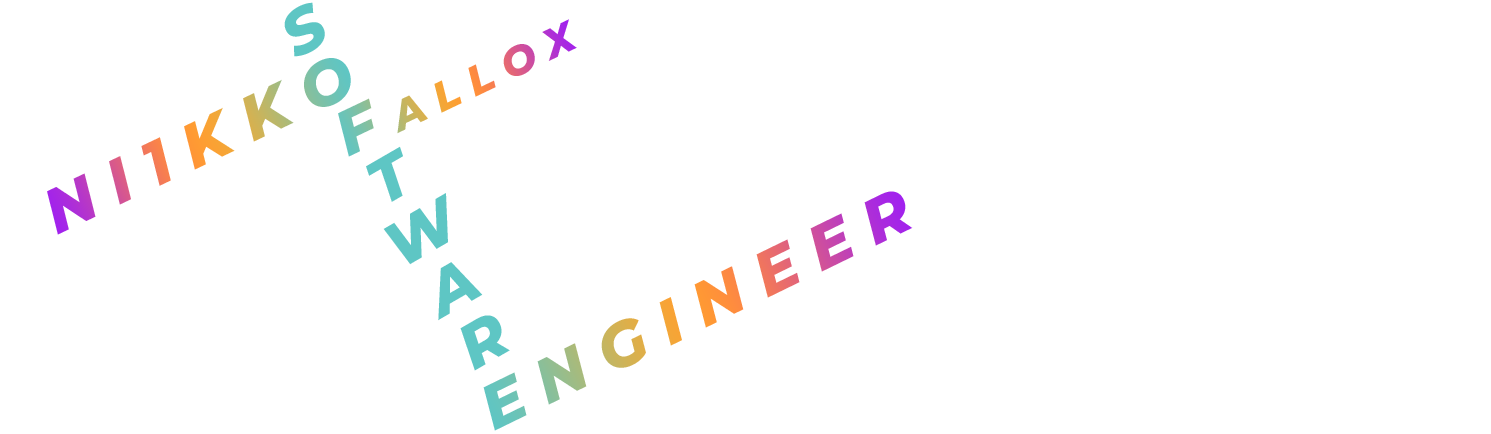
<style>
.page{position:relative;width:1491px;height:434px;background:#ffffff}
.page>*{position:absolute;margin:0}
.t1{font:62.5px "Montserrat-ExtraBoldItalic";color:#5ec6c4}
.t2{font:41.7px "Montserrat-ExtraBoldItalic"}
.t3{font:62.5px "Montserrat-ExtraBoldItalic"}
</style>
<div class="page">
<p class="t1" style="left:284px;top:2px;width:226px;height:369px;rotate:-30deg">S      TWAR</p>
<p class="t2" style="left:338px;top:19px;width:239px;height:138px;rotate:-25deg"><span class="t3">F </span>A L L O X</p>
<p class="t3" style="left:47px;top:58px;width:304px;height:177px;rotate:-25deg">N I 1 K K O</p>
<p class="t3" style="left:483px;top:191px;width:430px;height:240px;rotate:-26deg">E N G I N E E R</p>
</div>
